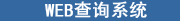
<style>
.page{position:relative;width:180px;height:21px;background:#3468a1}
.page>*{position:absolute;margin:0}
.t1{font:18px "SimHei";color:#ffffff;font-weight:bold}
</style>
<div class="page">
<p class="t1" style="left:45px;top:1px;width:102px;height:17px">WEB查询系统</p>
</div>
